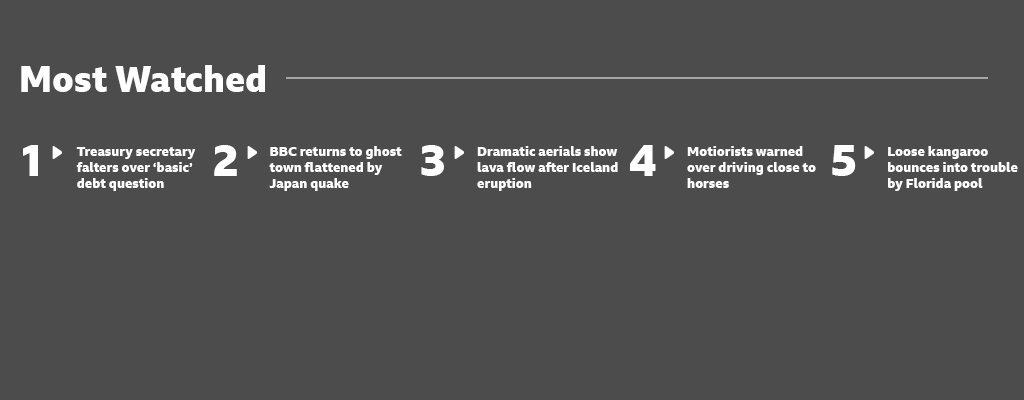
<style>
.page{position:relative;width:1024px;height:400px;background:#4c4c4c}
.page>*{position:absolute;margin:0}
.t1{font:36px "BBCReithSans-XBold";color:#ffffff}
.t2{font:44px "BBCReithSans-XBold";color:#ffffff}
.t3{font:13.2px "BBCReithSans-XBold";color:#ffffff}
</style>
<div class="page">
<p class="t1" style="left:21px;top:65px;width:244px;height:27px">Most Watched</p>
<p class="t2" style="left:23px;top:145px;width:15px;height:31px">1</p>
<p class="t3" style="left:76px;top:147px;width:120px;height:44px">Treasury secretary falters over ‘basic’ debt question</p>
<p class="t2" style="left:214px;top:145px;width:23px;height:31px">2</p>
<p class="t3" style="left:269px;top:146px;width:133px;height:45px">BBC returns to ghost town flattened by Japan quake</p>
<p class="t2" style="left:421px;top:145px;width:23px;height:31px">3</p>
<p class="t3" style="left:477px;top:146px;width:141px;height:45px">Dramatic aerials show lava flow after Iceland eruption</p>
<p class="t2" style="left:630px;top:145px;width:26px;height:31px">4</p>
<p class="t3" style="left:687px;top:146px;width:129px;height:42px">Motiorists warned over driving close to horses</p>
<p class="t2" style="left:832px;top:145px;width:24px;height:31px">5</p>
<p class="t3" style="left:888px;top:146px;width:130px;height:45px">Loose kangaroo bounces into trouble by Florida pool</p>
</div>
